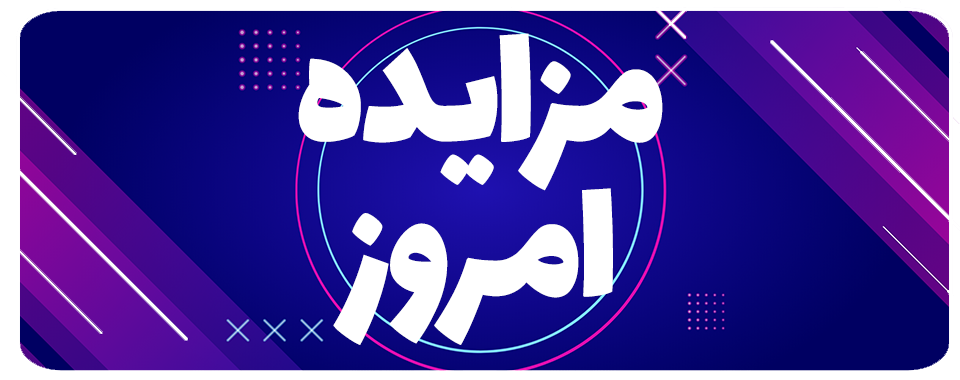
<style>
.page{position:relative;width:960px;height:380px}
.page>*{position:absolute;margin:0}
.t1{font:190.1px "Lalezar-Regular";letter-spacing:-0.03em;color:#ffffff;scale:0.92 1}
</style>
<div class="page">
<p class="t1" style="left:298px;top:33px;width:365px;height:158px">مزایده</p>
<p class="t1" style="left:333px;top:188px;width:280px;height:157px">امروز</p>
</div>
